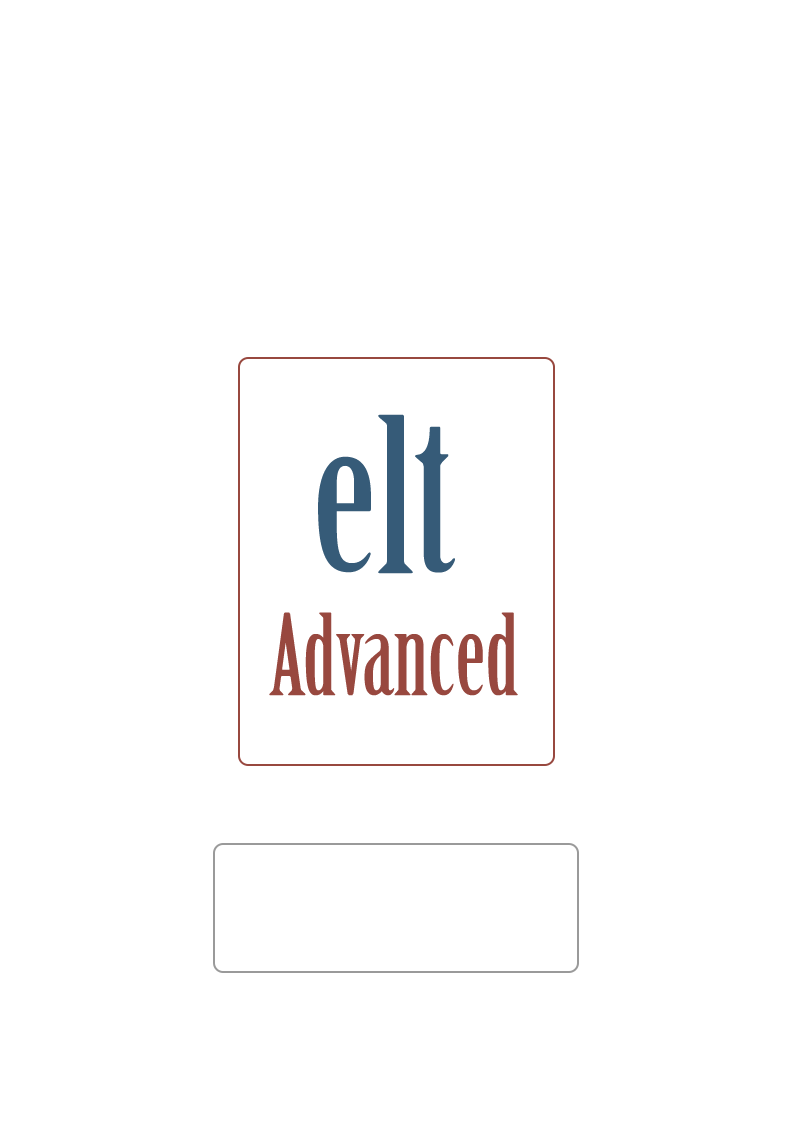
<style>
.page{position:relative;width:794px;height:1123px;background:#ffffff}
.page>*{position:absolute;margin:0}
.t1{font:211.1px "BirchStd";color:#365b78;scale:1.14 1}
.t2{font:210.2px "BirchStd";color:#365b78;scale:1.11 1}
.t3{font:207.4px "BirchStd";color:#365b78;scale:1.14 1}
.t4{font:110px "BirchStd";color:#98483f}
</style>
<div class="page">
<p class="t1" style="left:378px;top:414px;width:35px;height:160px">l</p>
<p class="t2" style="left:415px;top:426px;width:40px;height:147px">t</p>
<p class="t3" style="left:318px;top:456px;width:53px;height:117px">e</p>
<p class="t4" style="left:269px;top:612px;width:249px;height:84px">Advanced</p>
</div>
